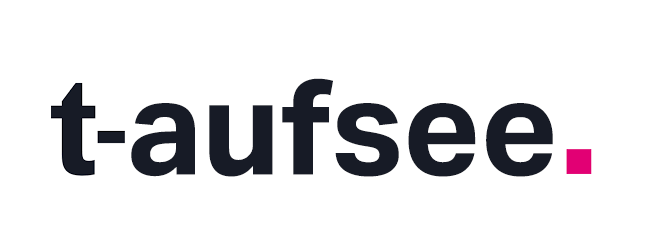
<style>
.page{position:relative;width:647px;height:251px;background:#ffffff}
.page>*{position:absolute;margin:0}
.t1{font:132.3px "AktivGrotesk-Bold";color:#171b26}
</style>
<div class="page">
<p class="t1" style="left:131px;top:78px;width:422px;height:99px">aufsee</p>
</div>
